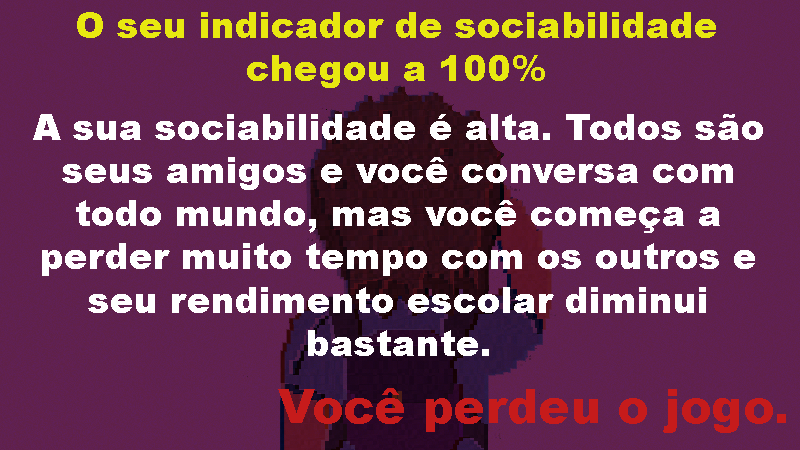
<style>
.page{position:relative;width:800px;height:450px}
.page>*{position:absolute;margin:0}
.t1{font:36px "Arial-Black";color:#e8e810}
.t2{font:36px "Arial-Black";color:#ffffff}
.t3{font:47.2px "Arial-Black";color:#c61b1b}
</style>
<div class="page">
<p class="t1" style="left:77px;top:12px;width:639px;height:76px;text-align:center">O seu indicador de sociabilidade  chegou a 100%</p>
<p class="t2" style="left:33px;top:114px;width:730px;height:242px;text-align:center">A sua sociabilidade é alta. Todos são seus amigos e você conversa com todo mundo, mas você começa a perder muito tempo com os outros e  seu rendimento escolar diminui bastante.</p>
<p class="t3" style="left:278px;top:388px;width:508px;height:45px">Você perdeu o jogo.</p>
</div>
